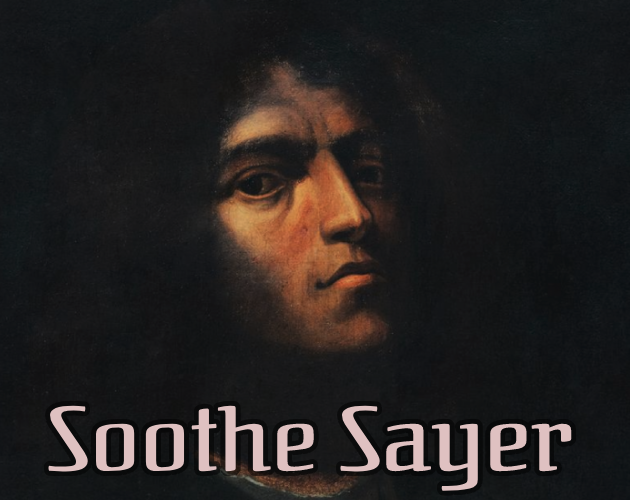
<style>
.page{position:relative;width:630px;height:500px}
.page>*{position:absolute;margin:0}
.t1{font:90px "Federant-Regular";color:#dfc1c1}
</style>
<div class="page">
<p class="t1" style="left:48px;top:405px;width:524px;height:86px">Soothe Sayer</p>
</div>
